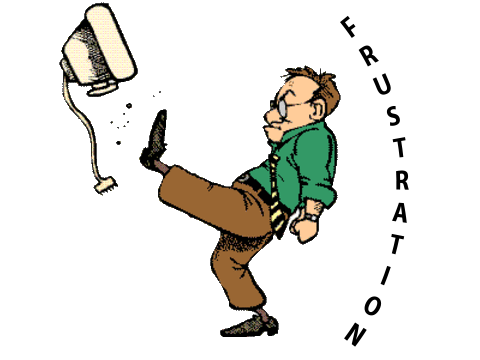
<style>
.page{position:relative;width:480px;height:360px;background:#ffffff}
.page>*{position:absolute;margin:0}
.t1{font:24px "MyriadPro-Bold";color:#000000}
</style>
<div class="page">
<p class="t1" style="left:340px;top:15px;width:69px;height:332px;text-align:center">F<br>R<br>U<br>S<br>T<br>R<br>A<br>T<br>I<br>O<br>N</p>
</div>
